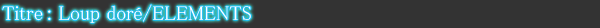
<style>
.page{position:relative;width:600px;height:28px;background:#333333}
.page>*{position:absolute;margin:0}
.t1{font:20px "MS-PMincho";color:#ffffff}
</style>
<div class="page">
<p class="t1" style="left:2px;top:4px;width:249px;height:19px">Titre : Loup doré/ELEMENTS</p>
</div>
